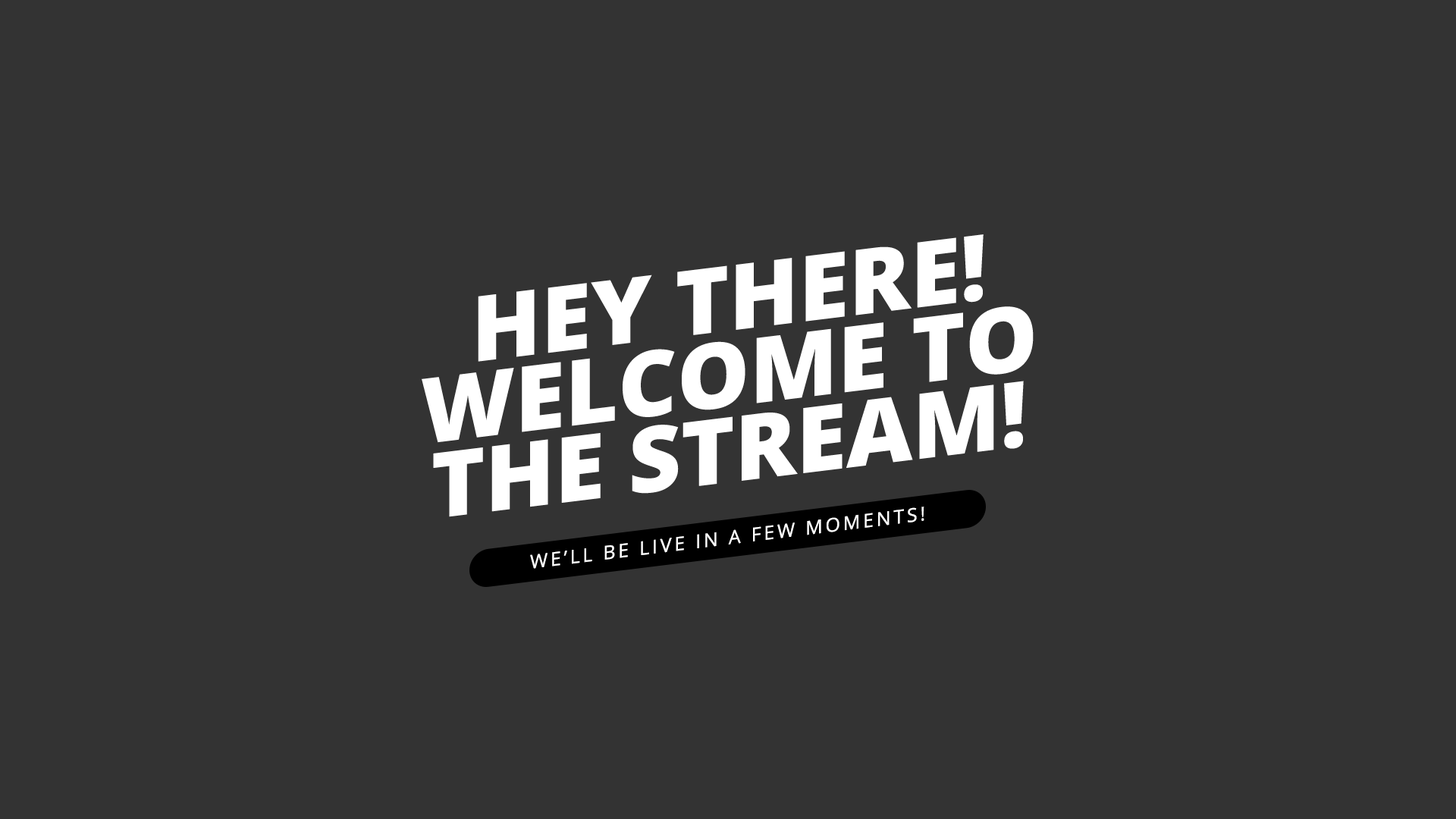
<style>
.page{position:relative;width:1456px;height:819px;background:#333333}
.page>*{position:absolute;margin:0}
.t1{font:91px/75.8px "OpenSans-Extrabold";color:#ffffff}
.t2{font:19px "OpenSans";letter-spacing:0.15em;color:#ffffff}
</style>
<div class="page">
<p class="t1" style="left:422px;top:234px;width:612px;height:283px;text-align:center;rotate:-7deg">HEY THERE!<br>WELCOME TO<br>THE STREAM!</p>
<p class="t2" style="left:530px;top:507px;width:394px;height:62px;rotate:-7deg">WE’LL BE LIVE IN A FEW MOMENTS!</p>
</div>
